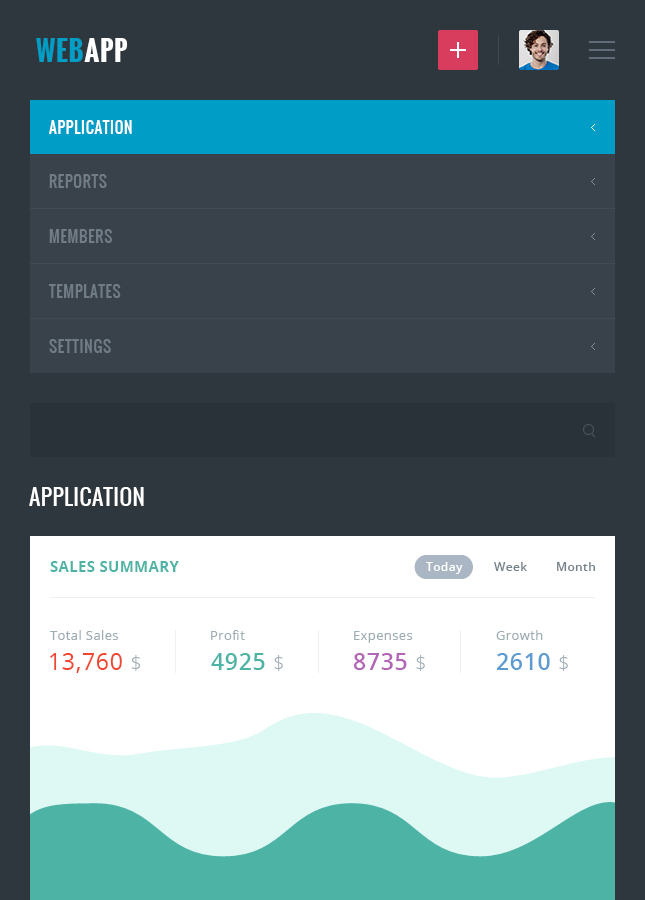
<style>
.page{position:relative;width:645px;height:900px;background:#2f373e}
.page>*{position:absolute;margin:0}
.t1{font:27px "Oswald-Bold";letter-spacing:0.03em;color:#009dc7;text-transform:uppercase}
.t2{font:27px "Oswald-Bold";letter-spacing:0.03em;color:#ffffff;text-transform:uppercase}
.t3{font:15px "Oswald-Regular";letter-spacing:0.05em;color:#ffffff;text-transform:uppercase}
.t4{font:15px "Oswald-Regular";letter-spacing:0.05em;color:#707c86;text-transform:uppercase}
.t5{font:22px "Oswald-Regular";letter-spacing:0.02em;color:#ffffff}
.t6{font:15px "OpenSans-Bold";letter-spacing:0.02em;color:#4db3a4}
.t7{font:12px "OpenSans-Semibold";letter-spacing:0.03em;color:#ffffff}
.t8{font:12px "OpenSans-Semibold";letter-spacing:0.03em;color:#73818a}
.t9{font:13px "OpenSans";letter-spacing:0.03em;color:#9eacb4}
.t10{font:23px "OpenSans";letter-spacing:0.03em;color:#f04531}
.t11{font:20px "OpenSans-Light";letter-spacing:0.03em;color:#9eacb4}
.t12{font:23px "OpenSans-Semibold";letter-spacing:0.03em;color:#4db3a4}
.t13{font:23px "OpenSans-Semibold";letter-spacing:0.03em;color:#b465b7}
.t14{font:23px "OpenSans-Semibold";letter-spacing:0.03em;color:#5b9bd1}
</style>
<div class="page">
<p class="t1" style="left:36px;top:38px;width:92px;height:24px">Web<span class="t2">App</span></p>
<p class="t3" style="left:49px;top:120px;width:83px;height:14px">APPLICATION</p>
<p class="t4" style="left:49px;top:174px;width:58px;height:14px">REPORTS</p>
<p class="t4" style="left:49px;top:229px;width:63px;height:14px">MEMBERS</p>
<p class="t4" style="left:48px;top:284px;width:73px;height:14px">TEMPLATES</p>
<p class="t4" style="left:49px;top:339px;width:62px;height:14px">SETTINGS</p>
<p class="t5" style="left:29px;top:487px;width:115px;height:19px">APPLICATION</p>
<p class="t6" style="left:50px;top:561px;width:129px;height:11px">SALES SUMMARY</p>
<p class="t7" style="left:426px;top:562px;width:37px;height:12px">Today</p>
<p class="t8" style="left:494px;top:562px;width:33px;height:9px">Week</p>
<p class="t8" style="left:557px;top:562px;width:39px;height:9px">Month</p>
<p class="t9" style="left:50px;top:630px;width:68px;height:10px">Total Sales</p>
<p class="t9" style="left:211px;top:630px;width:34px;height:10px">Profit</p>
<p class="t9" style="left:496px;top:630px;width:47px;height:10px">Growth</p>
<p class="t9" style="left:354px;top:631px;width:59px;height:12px">Expenses</p>
<p class="t10" style="left:50px;top:653px;width:90px;height:20px">13,760 <span class="t11">$</span></p>
<p class="t12" style="left:211px;top:653px;width:72px;height:18px">4925 <span class="t11">$</span></p>
<p class="t13" style="left:354px;top:653px;width:71px;height:18px">8735 <span class="t11">$</span></p>
<p class="t14" style="left:497px;top:653px;width:71px;height:18px">2610 <span class="t11">$</span></p>
</div>
